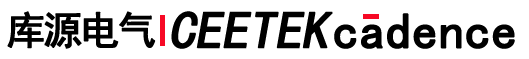
<style>
.page{position:relative;width:529px;height:59px;background:#ffffff}
.page>*{position:absolute;margin:0}
.t1{font:38.6px "SimHei";letter-spacing:-0.075em;color:#000000;font-weight:bold}
.t2{font:52.3px "SimHei";letter-spacing:-0.025em;color:#000000;font-weight:bold;font-style:italic}
.t3{font:50.1px "SimHei";color:#000000;font-weight:bold}
</style>
<div class="page">
<p class="t1" style="left:7px;top:11px;width:149px;height:38px">库源电气</p>
<p class="t2" style="left:171px;top:11px;width:162px;height:38px">CEETEK</p>
<p class="t3" style="left:334px;top:13px;width:181px;height:36px">cadence</p>
</div>
